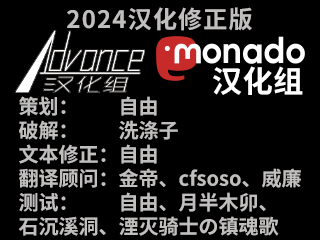
<style>
.page{position:relative;width:320px;height:240px;background:#000000}
.page>*{position:absolute;margin:0}
.t1{font:24px "SourceHanSansSC-Bold";letter-spacing:0.05em;color:#c1bebe}
.t2{font:30.1px "SourceHanSansSC-Bold";letter-spacing:0.023em;color:#ffffff}
.t3{font:20px/24px "SourceHanSansSC-Bold";color:#c1bebe}
</style>
<div class="page">
<p class="t1" style="left:67px;top:7px;width:185px;height:24px">2024汉化修正版</p>
<p class="t2" style="left:213px;top:66px;width:90px;height:29px">汉化组</p>
<p class="t3" style="left:18px;top:96px;width:283px;height:140px">策划：　　自由<br>破解：　　洗涤子<br>文本修正：自由<br>翻译顾问：金帝、cfsoso、威廉<br>测试：　　自由、月半木卯、<br>石沉溪洞、湮灭骑士の镇魂歌</p>
</div>
